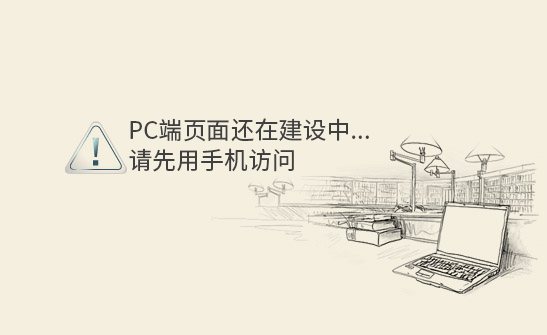
<style>
.page{position:relative;width:547px;height:335px;background:#f5efdf}
.page>*{position:absolute;margin:0}
.t1{font:24px/30px "SourceHanSansCN-Regular";color:#404040}
</style>
<div class="page">
<p class="t1" style="left:129px;top:118px;width:240px;height:54px">PC端页面还在建设中...<br>请先用手机访问</p>
</div>
